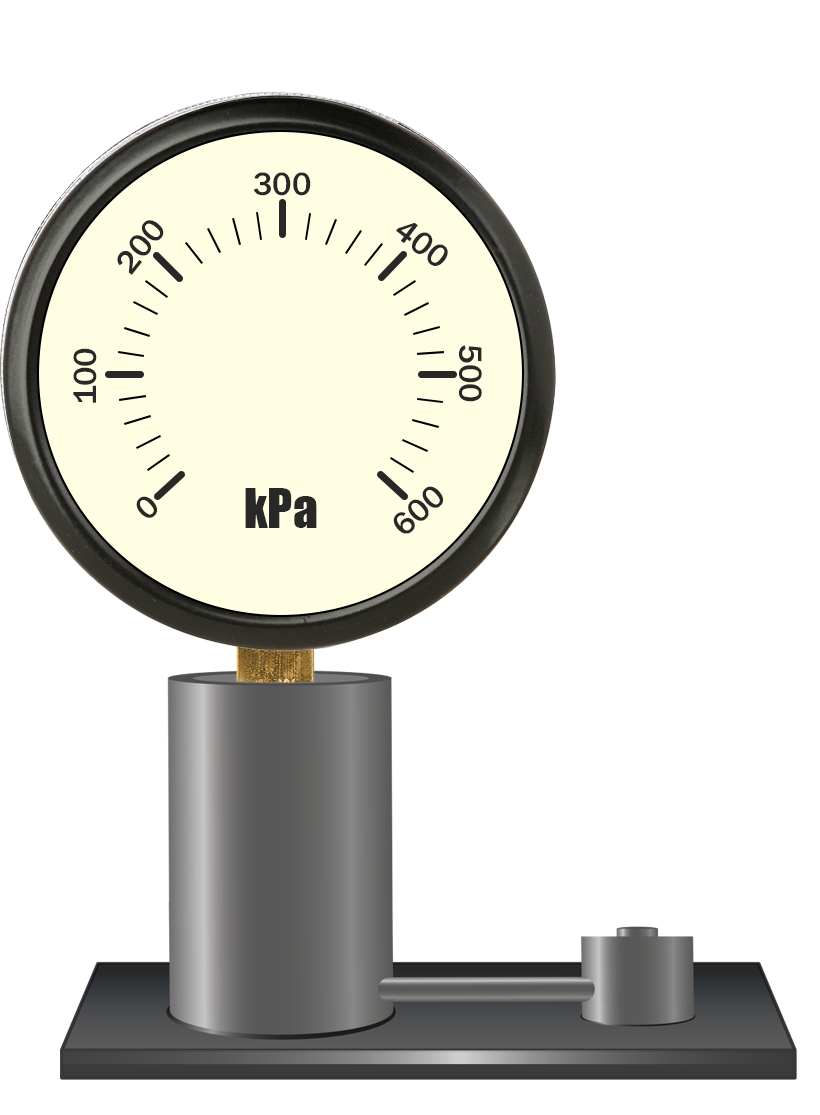
<style>
.page{position:relative;width:820px;height:1115px;background:#ffffff}
.page>*{position:absolute;margin:0}
.t1{font:33.3px "FranklinGothic-Medium";color:#282828}
.t2{font:50px "Impact";color:#282828}
</style>
<div class="page">
<p class="t1" style="left:253px;top:172px;width:58px;height:24px">300</p>
<p class="t1" style="left:117px;top:220px;width:47px;height:55px;rotate:-52deg">200</p>
<p class="t1" style="left:396px;top:222px;width:52px;height:44px;rotate:38deg">400</p>
<p class="t1" style="left:73px;top:348px;width:24px;height:55px;rotate:-90deg">100</p>
<p class="t1" style="left:459px;top:345px;width:23px;height:57px;rotate:90deg">500</p>
<p class="t1" style="left:393px;top:486px;width:50px;height:48px;rotate:-42deg">600</p>
<p class="t1" style="left:136px;top:496px;width:21px;height:22px;rotate:-42deg">0</p>
<p class="t2" style="left:245px;top:488px;width:72px;height:40px">kPa</p>
</div>
